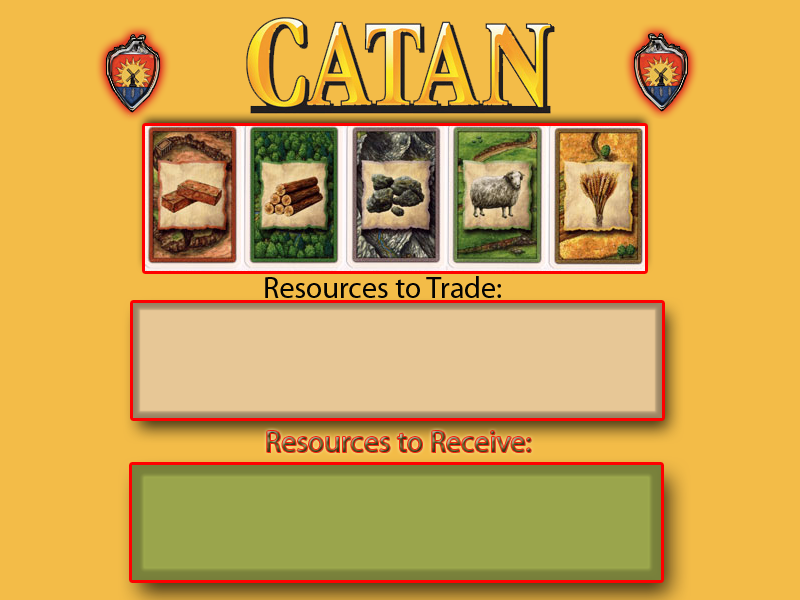
<style>
.page{position:relative;width:800px;height:600px;background:#f3bc48}
.page>*{position:absolute;margin:0}
.t1{font:30px "MyriadPro-Regular";color:#030303}
.t2{font:30px "MyriadPro-Regular"}
</style>
<div class="page">
<p class="t1" style="left:265px;top:276px;width:236px;height:22px">Resources to Trade:</p>
<p class="t2" style="left:267px;top:431px;width:264px;height:21px">Resources to Receive:</p>
</div>
